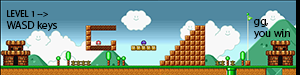
<style>
.page{position:relative;width:300px;height:75px}
.page>*{position:absolute;margin:0}
.t1{font:9px/8px "MyriadPro-Regular";color:#000000}
.t2{font:11px/12px "MyriadPro-Regular";color:#000000}
</style>
<div class="page">
<p class="t1" style="left:6px;top:10px;width:51px;height:21px">LEVEL 1 --&gt;<br><span class="t2">WASD keys</span></p>
<p class="t2" style="left:254px;top:19px;width:36px;height:20px">gg,<br>you win</p>
</div>
